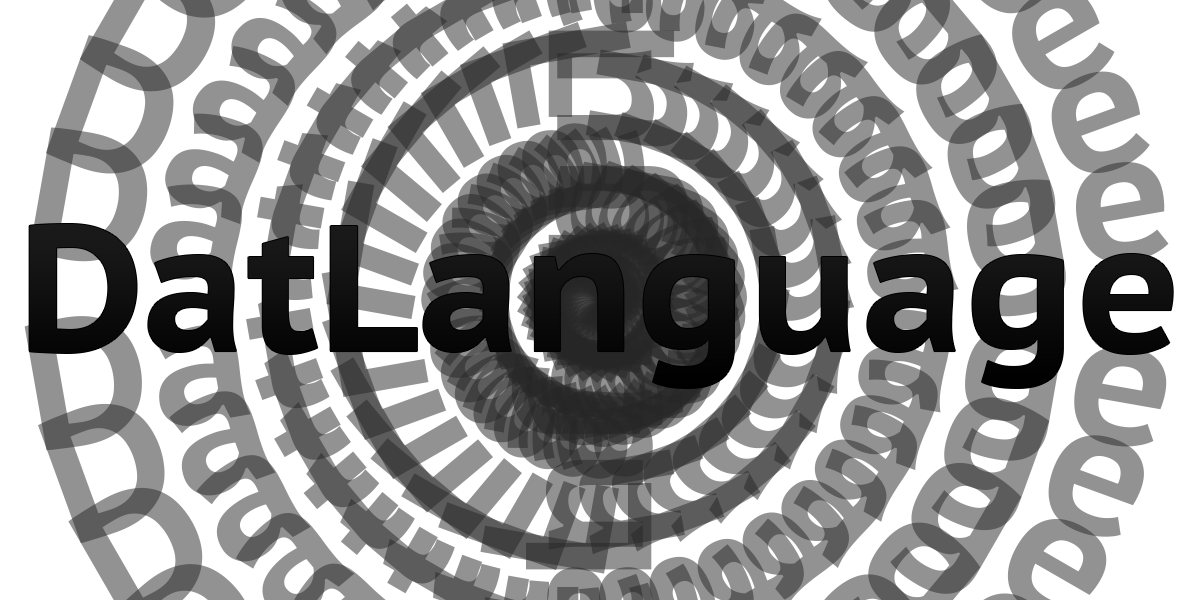
<style>
.page{position:relative;width:1200px;height:600px;background:#ffffff}
.page>*{position:absolute;margin:0}
.t1{font:179px "PTSans-CaptionBold";color:#000000}
</style>
<div class="page">
<p class="t1" style="left:29px;top:224px;width:1144px;height:164px">DatLanguage</p>
</div>
